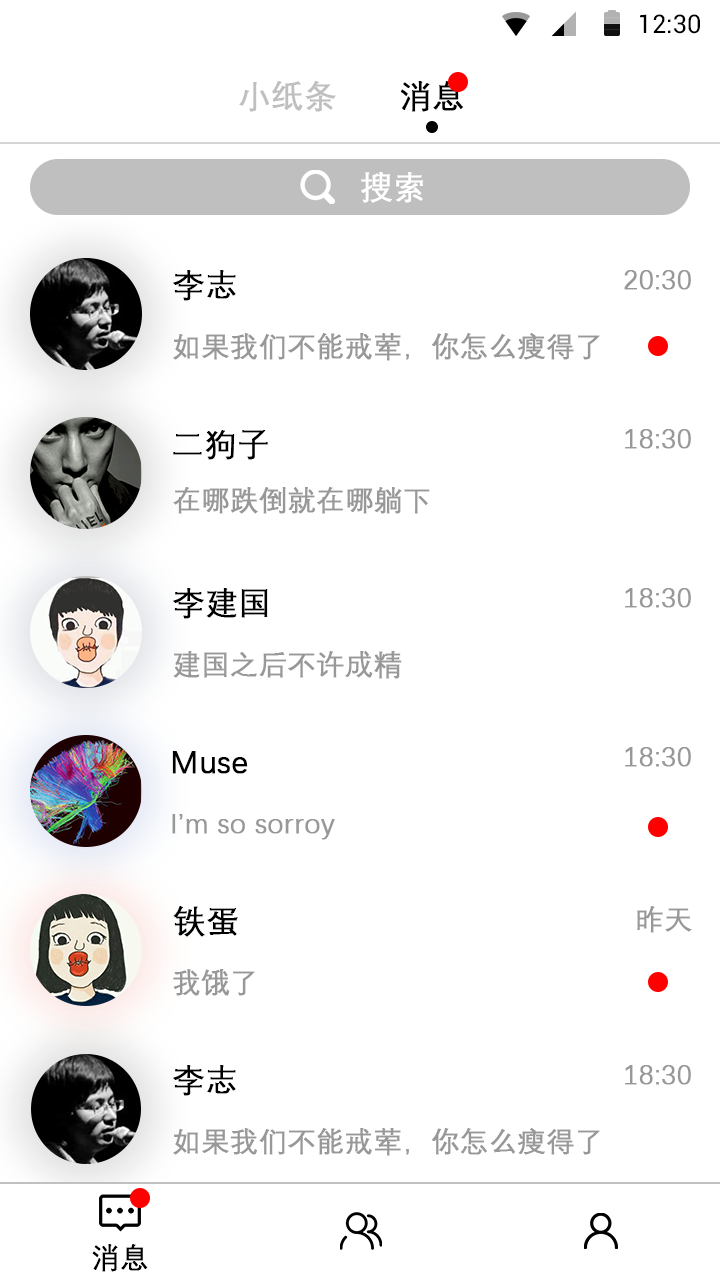
<style>
.page{position:relative;width:720px;height:1280px;background:#ffffff}
.page>*{position:absolute;margin:0}
.t1{font:25.4px "Roboto-Regular";color:#000000}
.t2{font:32px "DengXian-Regular";color:#bfbfbf;font-weight:bold}
.t3{font:32px "DengXian-Regular";color:#000000;font-weight:bold}
.t4{font:32px "DengXian-Regular";color:#ffffff;font-weight:bold}
.t5{font:28px "DengXian-Regular";color:#989898;font-weight:bold}
.t6{font:28px "DengXian-Regular";color:#000000;font-weight:bold}
</style>
<div class="page">
<p class="t1" style="left:640px;top:14px;width:60px;height:20px">12:30</p>
<p class="t2" style="left:239px;top:81px;width:97px;height:31px">小纸条</p>
<p class="t3" style="left:400px;top:81px;width:63px;height:31px">消息</p>
<p class="t4" style="left:361px;top:172px;width:62px;height:31px">搜索</p>
<p class="t3" style="left:173px;top:270px;width:63px;height:31px">李志</p>
<p class="t5" style="left:624px;top:270px;width:67px;height:20px">20:30</p>
<p class="t5" style="left:173px;top:333px;width:427px;height:28px">如果我们不能戒荤，你怎么瘦得了</p>
<p class="t3" style="left:173px;top:430px;width:95px;height:30px">二狗子</p>
<p class="t5" style="left:625px;top:429px;width:66px;height:20px">18:30</p>
<p class="t5" style="left:173px;top:487px;width:257px;height:27px">在哪跌倒就在哪躺下</p>
<p class="t3" style="left:173px;top:588px;width:95px;height:31px">李建国</p>
<p class="t5" style="left:625px;top:588px;width:66px;height:20px">18:30</p>
<p class="t5" style="left:173px;top:651px;width:229px;height:28px">建国之后不许成精</p>
<p class="t5" style="left:625px;top:747px;width:66px;height:20px">18:30</p>
<p class="t3" style="left:172px;top:751px;width:76px;height:23px">Muse</p>
<p class="t5" style="left:172px;top:814px;width:163px;height:26px">I’m so sorroy</p>
<p class="t3" style="left:173px;top:906px;width:65px;height:31px">铁蛋</p>
<p class="t5" style="left:637px;top:906px;width:55px;height:27px">昨天</p>
<p class="t5" style="left:173px;top:969px;width:82px;height:27px">我饿了</p>
<p class="t3" style="left:173px;top:1065px;width:63px;height:31px">李志</p>
<p class="t5" style="left:625px;top:1065px;width:66px;height:20px">18:30</p>
<p class="t5" style="left:173px;top:1128px;width:427px;height:28px">如果我们不能戒荤，你怎么瘦得了</p>
<p class="t6" style="left:92px;top:1244px;width:56px;height:28px">消息</p>
</div>
